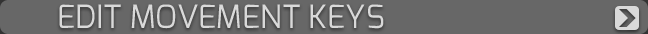
<style>
.page{position:relative;width:648px;height:34px;background:#676767}
.page>*{position:absolute;margin:0}
.t1{font:32px "Exo-Regular";color:#d9d9d9;text-transform:uppercase}
</style>
<div class="page">
<p class="t1" style="left:59px;top:4px;width:325px;height:25px">Edit Movement keys</p>
</div>
